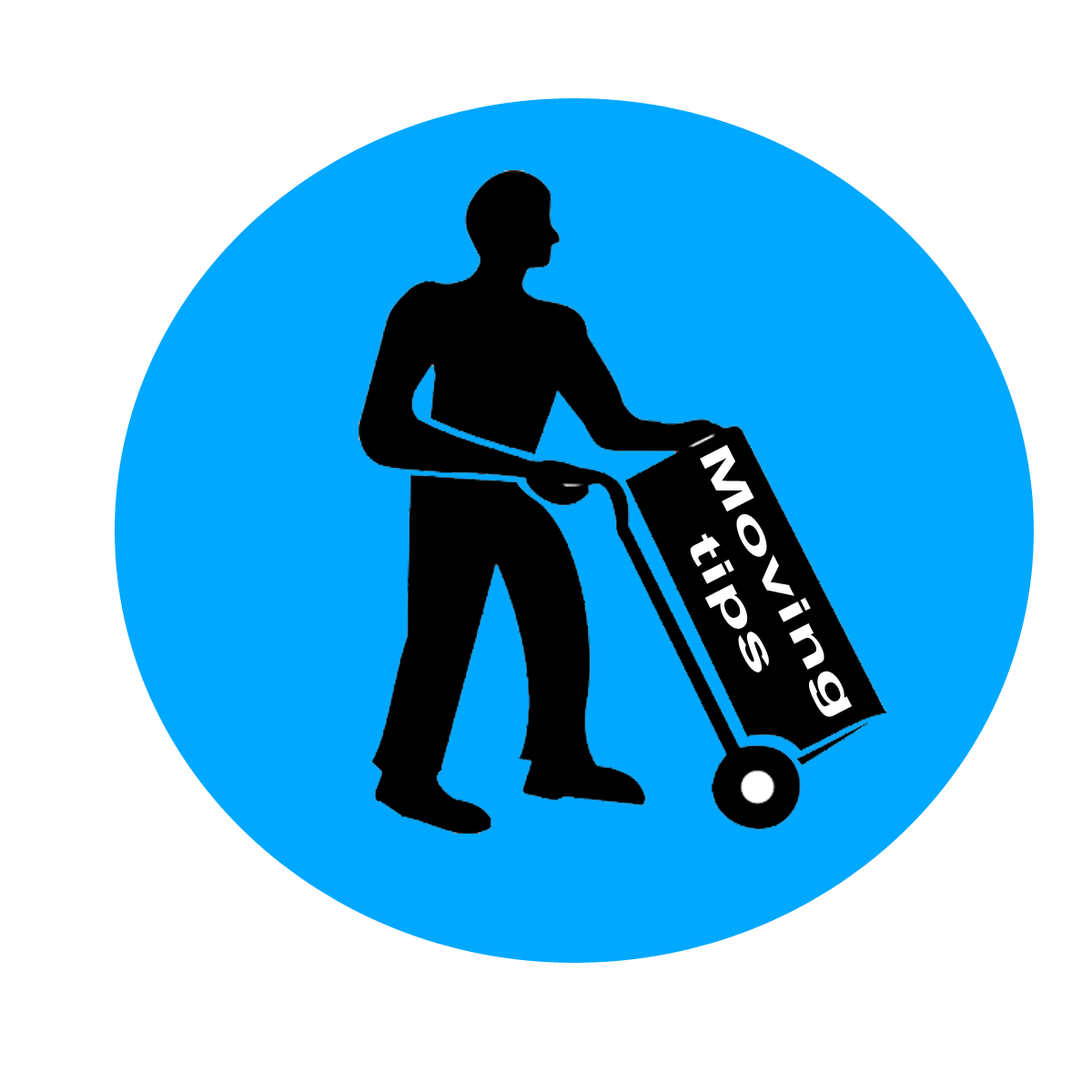
<style>
.page{position:relative;width:1092px;height:1092px;background:#ffffff}
.page>*{position:absolute;margin:0}
.t1{font:42.3px "Arial-BoldMT";color:#ffffff;scale:2.03 1}
</style>
<div class="page">
<p class="t1" style="left:690px;top:444px;width:163px;height:273px;text-align:center;rotate:63deg">Moving<br>tips</p>
</div>
